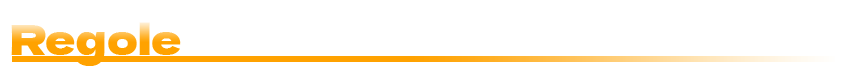
<style>
.page{position:relative;width:848px;height:67px;background:#ffffff}
.page>*{position:absolute;margin:0}
.t1{font:42px "DelaGothicOne-Regular";color:#ffa200}
</style>
<div class="page">
<p class="t1" style="left:11px;top:22px;width:170px;height:44px">Regole</p>
</div>
